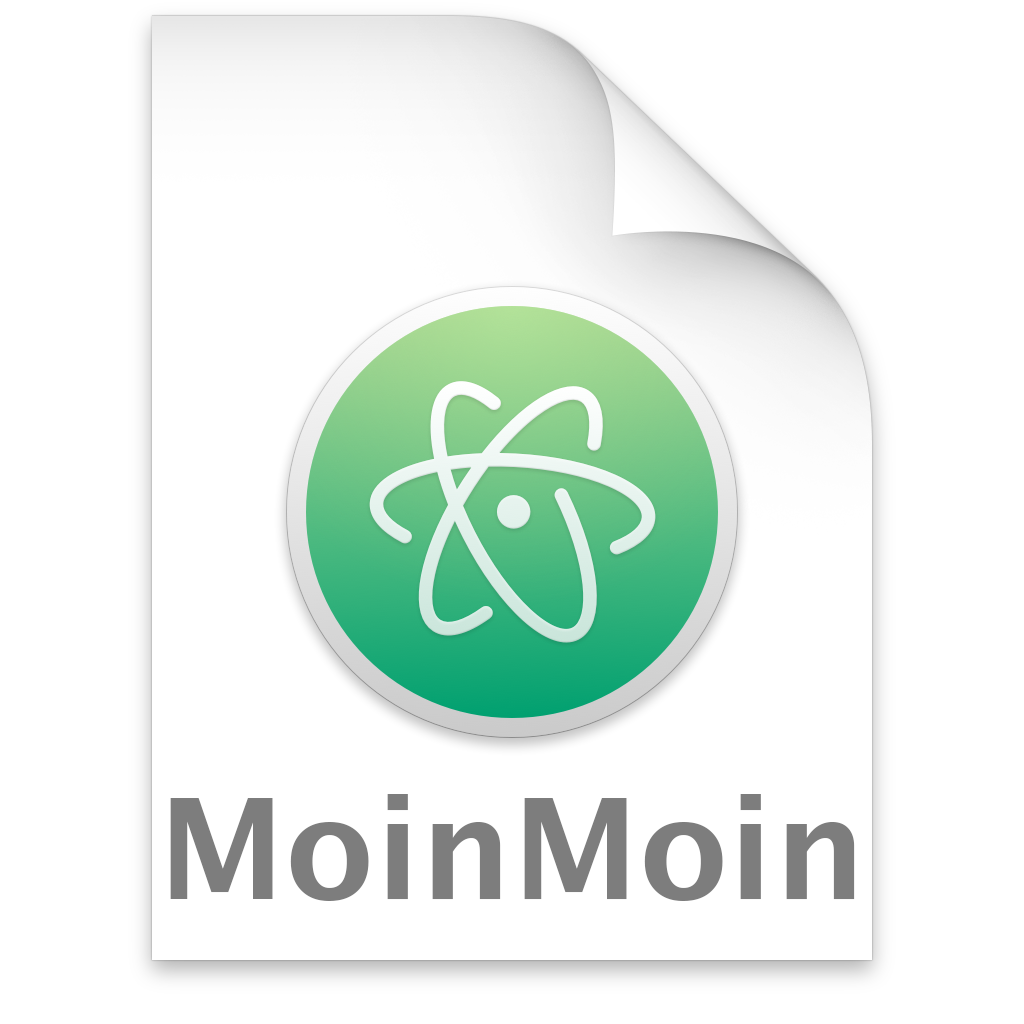
<style>
.page{position:relative;width:1024px;height:1024px;background:#ffffff}
.page>*{position:absolute;margin:0}
.t1{font:140px "LucidaGrande-Bold";color:#7d7d7d}
</style>
<div class="page">
<p class="t1" style="left:170px;top:794px;width:685px;height:107px">MoinMoin</p>
</div>
